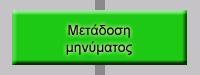
<style>
.page{position:relative;width:200px;height:75px;background:#c6c3c6}
.page>*{position:absolute;margin:0}
.t1{font:14px "ArialMT";color:#000000}
</style>
<div class="page">
<p class="t1" style="left:66px;top:24px;width:66px;height:31px;text-align:center">Μετάδοση<br>μηνύματος</p>
</div>
